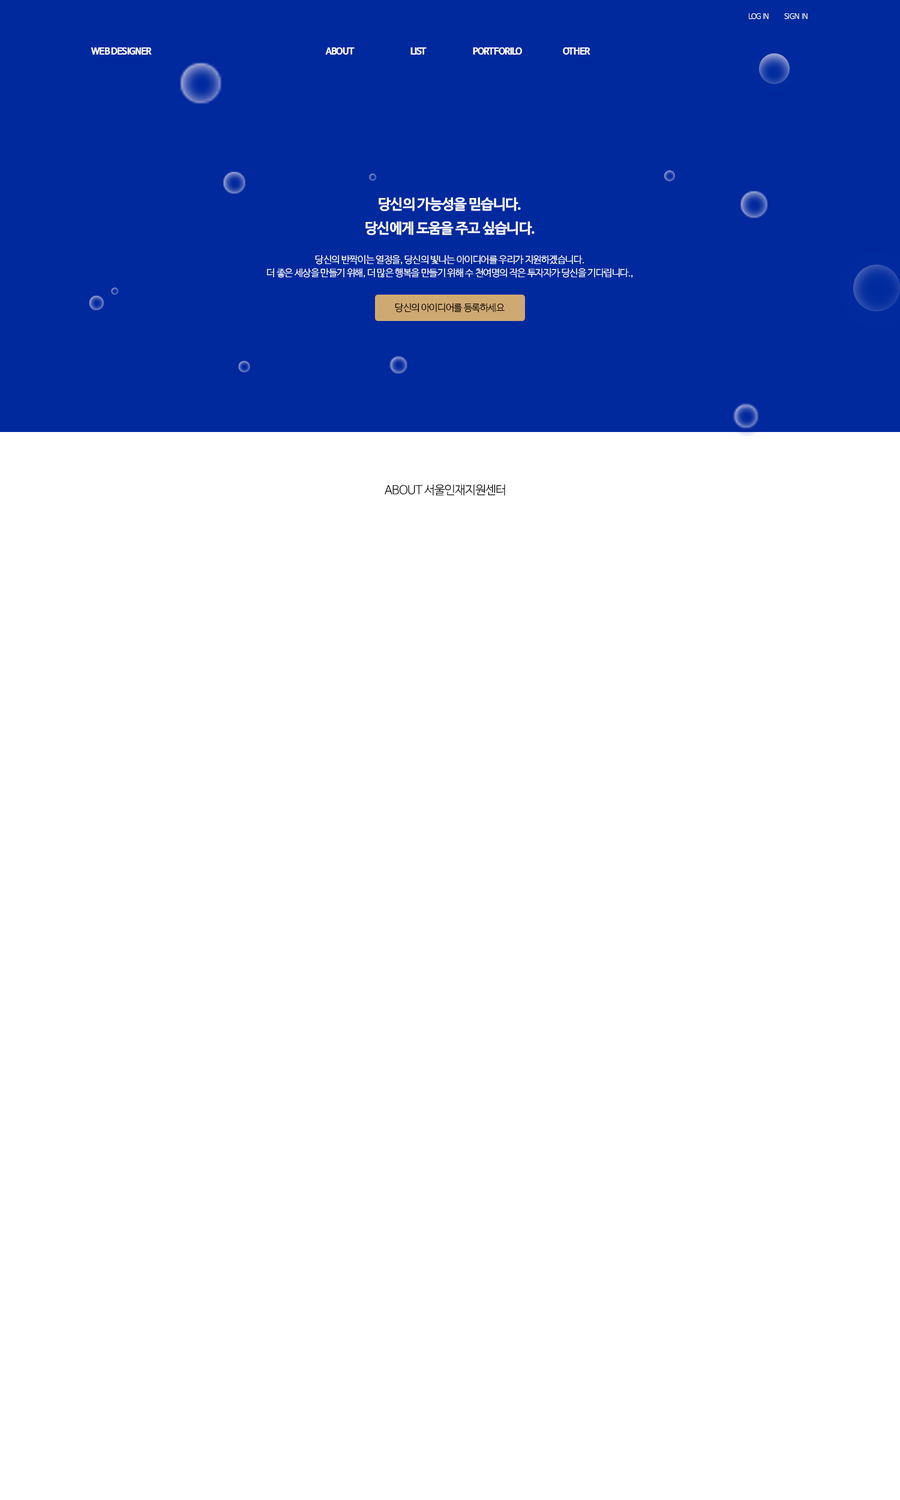
<style>
.page{position:relative;width:900px;height:1500px;background:#ffffff}
.page>*{position:absolute;margin:0}
.t1{font:7.2px "NanumBarunGothicOTFLight";letter-spacing:-0.045em;color:#ffffff}
.t2{font:9px "NanumBarunGothicOTFBold";letter-spacing:-0.045em;color:#ffffff}
.t3{font:14.4px "NanumBarunGothicOTFBold";letter-spacing:-0.045em;color:#ffffff}
.t4{font:9.6px "NanumBarunGothicOTFLight";letter-spacing:-0.045em;color:#ffffff}
.t5{font:9.6px "NanumBarunGothicOTFLight";letter-spacing:-0.045em;color:#000000}
.t6{font:12px "NanumBarunGothicOTFLight";letter-spacing:-0.045em;color:#000000}
</style>
<div class="page">
<p class="t1" style="left:749px;top:13px;width:20px;height:6px">LOG IN</p>
<p class="t1" style="left:784px;top:13px;width:24px;height:6px">SIGN  IN</p>
<p class="t2" style="left:91px;top:47px;width:61px;height:8px">WEB DESIGNER</p>
<p class="t2" style="left:325px;top:47px;width:30px;height:8px">ABOUT</p>
<p class="t2" style="left:410px;top:47px;width:17px;height:8px">LIST</p>
<p class="t2" style="left:473px;top:47px;width:49px;height:8px">PORTFORILO</p>
<p class="t2" style="left:563px;top:47px;width:27px;height:8px">OTHER</p>
<p class="t3" style="left:379px;top:197px;width:142px;height:14px">당신의 가능성을 믿습니다.</p>
<p class="t3" style="left:365px;top:221px;width:170px;height:14px">당신에게 도움을 주고 싶습니다.</p>
<p class="t4" style="left:315px;top:255px;width:269px;height:10px">당신의 반짝이는 열정을, 당신의 빛나는 아이디어를 우리가 지원하겠습니다.</p>
<p class="t4" style="left:267px;top:268px;width:366px;height:10px">더 좋은 세상을 만들기 위해, 더 많은 행복을 만들기 위해 수 천여명의 작은 투자자가 당신을 기다립니다.,</p>
<p class="t5" style="left:395px;top:303px;width:110px;height:10px">당신의 아이디어를 등록하세요</p>
<p class="t6" style="left:385px;top:484px;width:120px;height:12px">ABOUT 서울인재지원센터</p>
</div>
